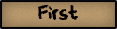
<style>
.page{position:relative;width:117px;height:29px}
.page>*{position:absolute;margin:0}
.t1{font:15px "squeakychalksound";color:#000000}
</style>
<div class="page">
<p class="t1" style="left:38px;top:5px;width:40px;height:15px">First</p>
</div>
